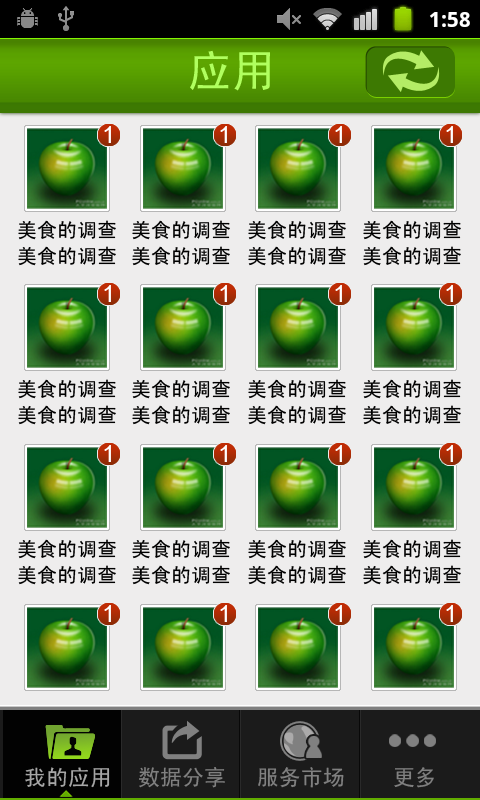
<style>
.page{position:relative;width:480px;height:800px;background:#eeeded}
.page>*{position:absolute;margin:0}
.t1{font:44px "SimHei";color:#b0ff5f}
.t2{font:23px "ArialMT";color:#fffefe}
.t3{font:20px/26px "SimHei";color:#000000}
.t4{font:22px "SimHei";color:#a6a6a6}
.t5{font:22px "SimHei";color:#808080}
</style>
<div class="page">
<p class="t1" style="left:190px;top:50px;width:80px;height:41px">应用</p>
<p class="t2" style="left:104px;top:126px;width:7px;height:17px">1</p>
<p class="t2" style="left:220px;top:126px;width:7px;height:17px">1</p>
<p class="t2" style="left:335px;top:126px;width:7px;height:17px">1</p>
<p class="t2" style="left:446px;top:126px;width:7px;height:17px">1</p>
<p class="t3" style="left:18px;top:220px;width:98px;height:46px">美食的调查<br>美食的调查</p>
<p class="t3" style="left:132px;top:220px;width:98px;height:46px">美食的调查<br>美食的调查</p>
<p class="t3" style="left:248px;top:220px;width:98px;height:46px">美食的调查<br>美食的调查</p>
<p class="t3" style="left:363px;top:220px;width:98px;height:46px">美食的调查<br>美食的调查</p>
<p class="t2" style="left:104px;top:285px;width:7px;height:17px">1</p>
<p class="t2" style="left:220px;top:285px;width:7px;height:17px">1</p>
<p class="t2" style="left:335px;top:285px;width:7px;height:17px">1</p>
<p class="t2" style="left:446px;top:285px;width:7px;height:17px">1</p>
<p class="t3" style="left:18px;top:379px;width:98px;height:46px">美食的调查<br>美食的调查</p>
<p class="t3" style="left:132px;top:379px;width:98px;height:46px">美食的调查<br>美食的调查</p>
<p class="t3" style="left:248px;top:379px;width:98px;height:46px">美食的调查<br>美食的调查</p>
<p class="t3" style="left:363px;top:379px;width:98px;height:46px">美食的调查<br>美食的调查</p>
<p class="t2" style="left:104px;top:445px;width:7px;height:17px">1</p>
<p class="t2" style="left:220px;top:445px;width:7px;height:17px">1</p>
<p class="t2" style="left:335px;top:445px;width:7px;height:17px">1</p>
<p class="t2" style="left:446px;top:445px;width:7px;height:17px">1</p>
<p class="t3" style="left:18px;top:539px;width:98px;height:46px">美食的调查<br>美食的调查</p>
<p class="t3" style="left:132px;top:539px;width:98px;height:46px">美食的调查<br>美食的调查</p>
<p class="t3" style="left:248px;top:539px;width:98px;height:46px">美食的调查<br>美食的调查</p>
<p class="t3" style="left:363px;top:539px;width:98px;height:46px">美食的调查<br>美食的调查</p>
<p class="t2" style="left:104px;top:605px;width:7px;height:17px">1</p>
<p class="t2" style="left:220px;top:605px;width:7px;height:17px">1</p>
<p class="t2" style="left:335px;top:605px;width:7px;height:17px">1</p>
<p class="t2" style="left:446px;top:605px;width:7px;height:17px">1</p>
<p class="t4" style="left:25px;top:767px;width:85px;height:21px">我的应用</p>
<p class="t5" style="left:139px;top:767px;width:86px;height:21px">数据分享</p>
<p class="t5" style="left:258px;top:767px;width:86px;height:21px">服务市场</p>
<p class="t5" style="left:394px;top:767px;width:40px;height:21px">更多</p>
</div>
